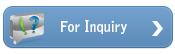
<style>
.page{position:relative;width:175px;height:54px;background:#ffffff}
.page>*{position:absolute;margin:0}
.t1{font:15px "BellGothicStd-Bold";color:#ffffff;scale:0.95 1}
.t2{font:14.8px "BellGothicStd-Bold";color:#ffffff;scale:0.95 1}
</style>
<div class="page">
<p class="t1" style="left:61px;top:20px;width:66px;height:14px"><span class="t2">For </span>Inquiry</p>
</div>
